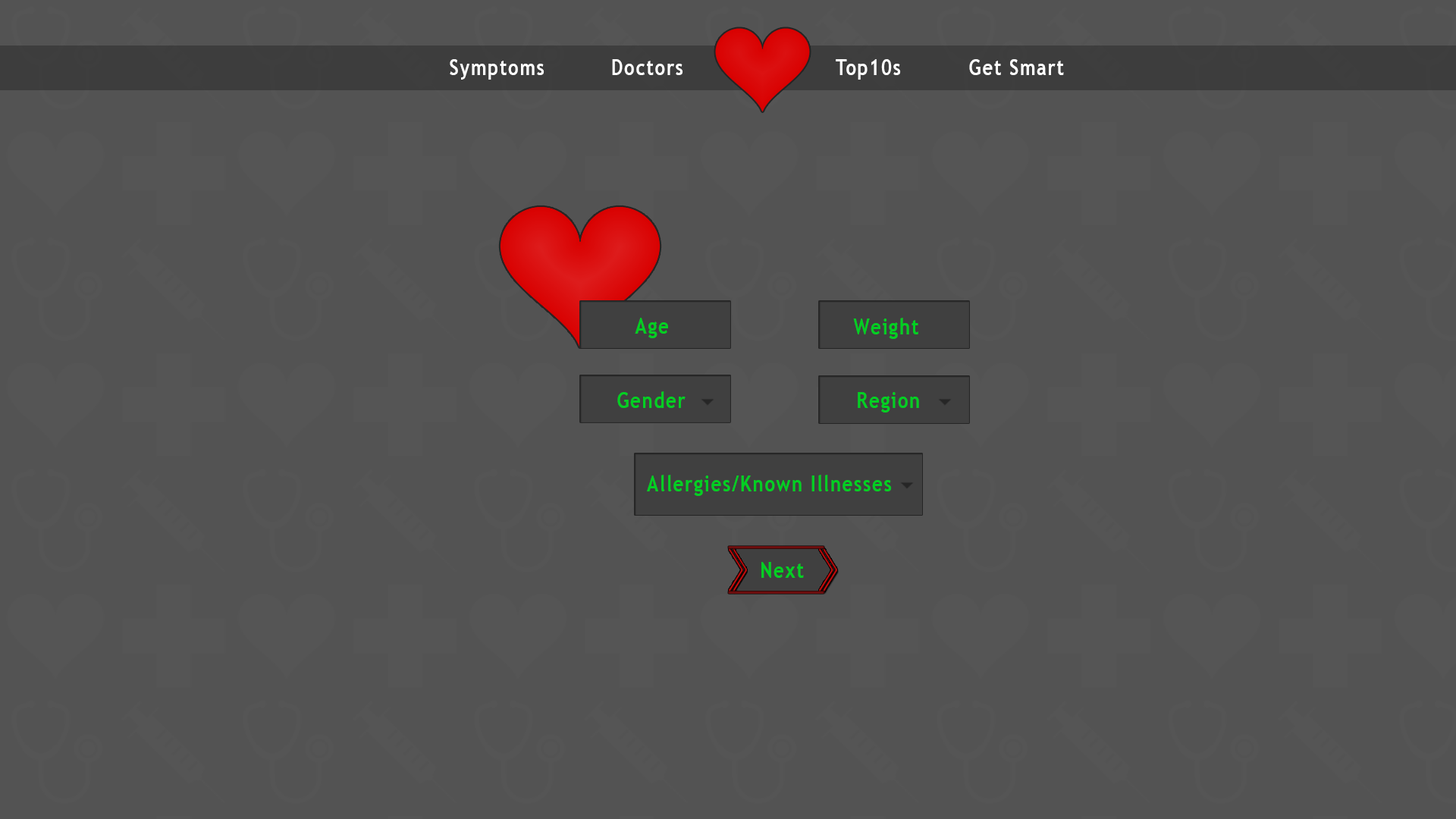
<style>
.page{position:relative;width:1456px;height:819px;background:#535353}
.page>*{position:absolute;margin:0}
.t1{font:21.8px "TrebuchetMS-Bold";letter-spacing:0.07em;color:#ffffff;scale:0.83 1}
.t2{font:21.8px "TrebuchetMS-Bold";letter-spacing:0.07em;color:#00d022;scale:0.83 1}
</style>
<div class="page">
<p class="t1" style="left:450px;top:59px;width:94px;height:21px">Symptoms</p>
<p class="t1" style="left:612px;top:59px;width:71px;height:16px">Doctors</p>
<p class="t1" style="left:836px;top:59px;width:65px;height:21px">Top10s</p>
<p class="t1" style="left:969px;top:59px;width:95px;height:16px">Get Smart</p>
<p class="t2" style="left:635px;top:318px;width:33px;height:20px">Age</p>
<p class="t2" style="left:853px;top:318px;width:65px;height:21px">Weight</p>
<p class="t2" style="left:617px;top:391px;width:69px;height:17px">Gender</p>
<p class="t2" style="left:858px;top:392px;width:61px;height:21px">Region</p>
<p class="t2" style="left:647px;top:475px;width:245px;height:21px">Allergies/Known Illnesses</p>
<p class="t2" style="left:761px;top:562px;width:43px;height:16px">Next</p>
</div>
